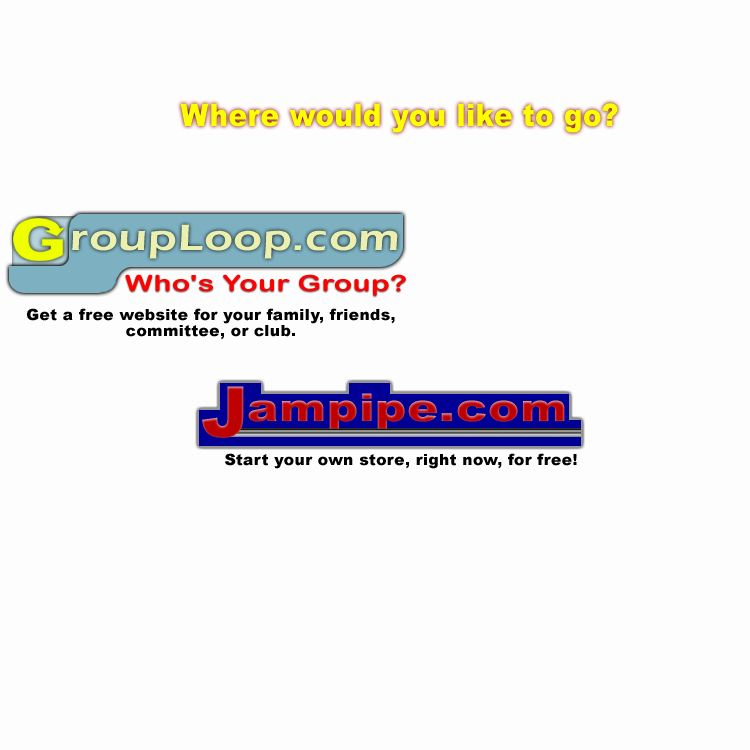
<style>
.page{position:relative;width:750px;height:750px;background:#fdfdfd}
.page>*{position:absolute;margin:0}
.t1{font:30.9px "Arial-Black";letter-spacing:0.015em;color:#fcff00;scale:0.9 1}
.t2{font:37.9px "ErasITC-Demi";letter-spacing:0.015em;color:#ebf0af;scale:1.23 1}
.t3{font:22.5px "ArialRoundedMTBold";letter-spacing:0.015em;color:#ff0000;scale:1.32 1}
.t4{font:15.6px/15.6px "Arial-Black";letter-spacing:0.015em;color:#000000}
.t5{font:70.4px "Arial-Black";letter-spacing:0.015em;color:#bd0000}
.t6{font:38.5px "Arial-Black";letter-spacing:0.015em;color:#bd0000;scale:1.22 1}
.t7{font:15.6px "Arial-Black";letter-spacing:0.015em;color:#000000}
</style>
<div class="page">
<p class="t1" style="left:180px;top:103px;width:438px;height:30px">Where would you like to go?</p>
<p class="t2" style="left:72px;top:224px;width:326px;height:35px">roupLoop.com</p>
<p class="t3" style="left:125px;top:274px;width:281px;height:22px">Who's Your Group?</p>
<p class="t4" style="left:27px;top:308px;width:368px;height:32px;text-align:center">Get a free website for your family, friends,<br>committee, or club.</p>
<p class="t5" style="left:202px;top:386px;width:42px;height:52px">J</p>
<p class="t6" style="left:248px;top:393px;width:317px;height:36px">ampipe.com</p>
<p class="t7" style="left:225px;top:453px;width:352px;height:16px">Start your own store, right now, for free!</p>
</div>
